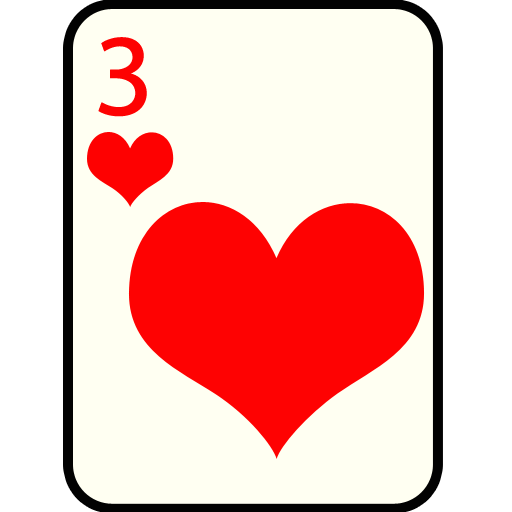
<style>
.page{position:relative;width:512px;height:512px;background:#fffff2}
.page>*{position:absolute;margin:0}
.t1{font:200px "MyriadPro-Regular";letter-spacing:-0.05em;color:#fd0202;font-variant:small-caps;font-weight:bold}
</style>
<div class="page">
<p class="t1" style="left:98px;top:37px;width:49px;height:80px">3</p>
</div>
